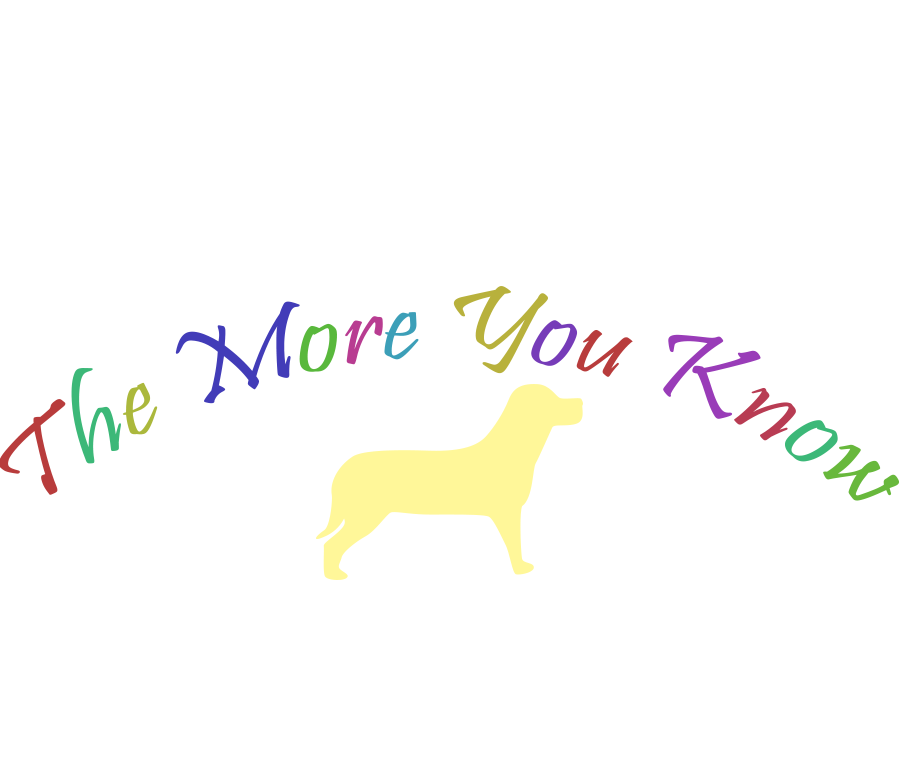
<style>
.page{position:relative;width:900px;height:768px;background:#ffffff}
.page>*{position:absolute;margin:0}
.t1{font:108.3px "Pristina-Regular";color:#b83c3c}
.t2{font:108.3px "Pristina-Regular";color:#3cb878}
.t3{font:108.3px "Pristina-Regular";color:#abb83c}
.t4{font:108.3px "Pristina-Regular";color:#423cb8}
.t5{font:108.3px "Pristina-Regular";color:#59b83c}
.t6{font:108.3px "Pristina-Regular";color:#b83c91}
.t7{font:108.3px "Pristina-Regular";color:#3c9fb8}
.t8{font:108.3px "Pristina-Regular";color:#b8b13c}
.t9{font:108.3px "Pristina-Regular";color:#763cb8}
.t10{font:108.3px "Pristina-Regular";color:#993cb8}
.t11{font:108.3px "Pristina-Regular";color:#b83c53}
.t12{font:108.3px "Pristina-Regular";color:#68b83c}
</style>
<div class="page">
<p class="t1" style="left:0px;top:286px;width:900px;height:215px;text-align:center">T<span class="t2">h</span><span class="t3">e </span><span class="t4">M</span><span class="t5">o</span><span class="t6">r</span><span class="t7">e </span><span class="t8">Y</span><span class="t9">o</span>u <span class="t10">K</span><span class="t11">n</span><span class="t2">o</span><span class="t12">w</span></p>
</div>
